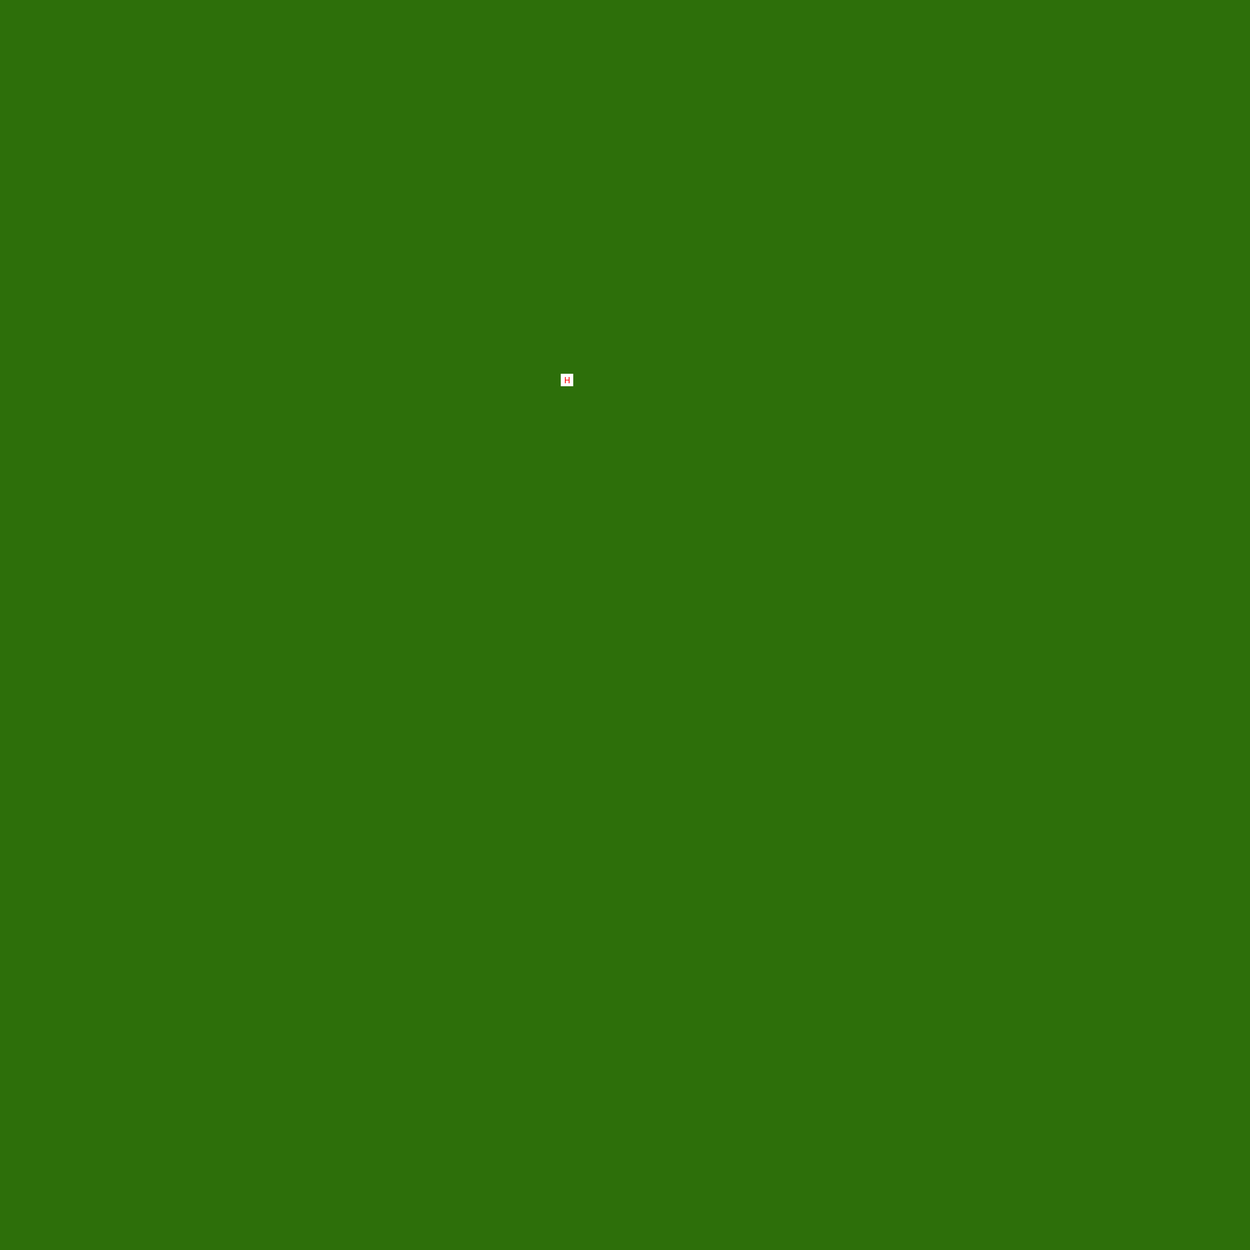
<style>
.page{position:relative;width:1250px;height:1250px;background:#2d6f0a}
.page>*{position:absolute;margin:0}
.t1{font:9px "MyriadPro-Regular";color:#ff0000}
</style>
<div class="page">
<p class="t1" style="left:565px;top:377px;width:5px;height:6px">H</p>
</div>
